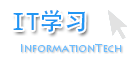
<style>
.page{position:relative;width:133px;height:60px;background:#ffffff}
.page>*{position:absolute;margin:0}
.t1{font:24px "DroidSansMono";color:#2196f3}
.t2{font:24px "AdobeHeitiStd-Regular";color:#2196f3}
.t3{font:10.5px "LithosPro-Regular";color:#6bbdff}
</style>
<div class="page">
<p class="t1" style="left:13px;top:9px;width:72px;height:23px">IT<span class="t2">学习</span></p>
<p class="t3" style="left:21px;top:43px;width:101px;height:9px">InformationTech</p>
</div>
